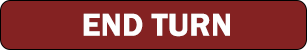
<style>
.page{position:relative;width:307px;height:50px;background:#842222}
.page>*{position:absolute;margin:0}
.t1{font:33px "FranklinGothic-Demi";color:#fefefe}
</style>
<div class="page">
<p class="t1" style="left:83px;top:13px;width:147px;height:24px">END TURN</p>
</div>
